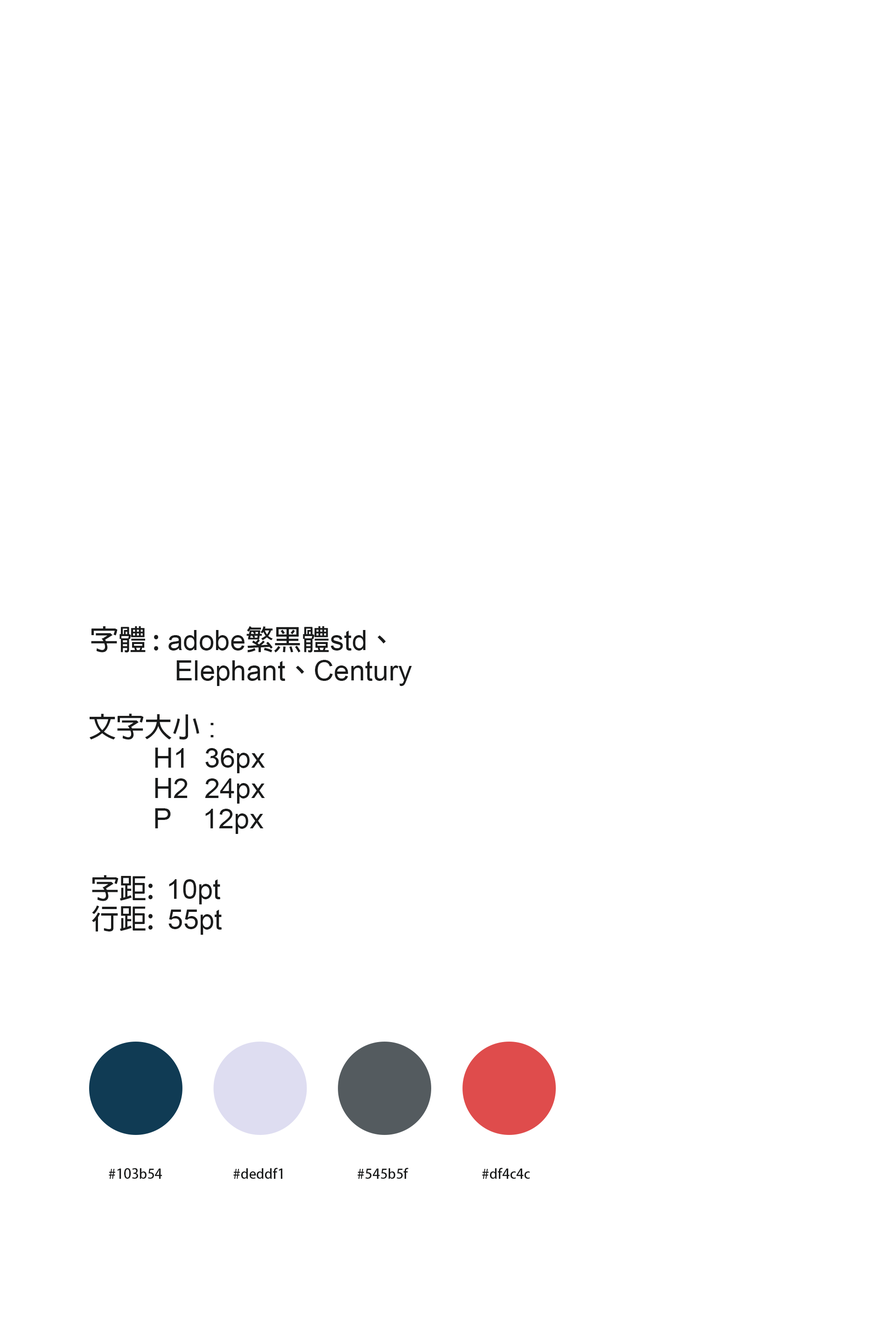
<style>
.page{position:relative;width:896px;height:1330px;background:#ffffff}
.page>*{position:absolute;margin:0}
.t1{font:28.1px/30.3px "ArialMT";color:#1a1b1b}
.t2{font:28.1px/30.3px "AdobeFanHeitiStd-Bold";color:#1a1b1b}
.t3{font:28px/30.3px "ArialMT";color:#1a1b1b}
.t4{font:28px/30.3px "AdobeFanHeitiStd-Bold";color:#1a1b1b}
.t5{font:13.5px "AdobeFanHeitiStd-Bold";color:#1a1b1b}
</style>
<div class="page">
<p class="t1" style="left:91px;top:626px;width:321px;height:60px"><span class="t2">字體 :</span> adobe<span class="t2">繁黑體</span>std<span class="t2">、<br>　　　</span>Elephant<span class="t2">、</span>Century</p>
<p class="t3" style="left:89px;top:714px;width:176px;height:120px"><span class="t4">文字大小</span> : <br>H1  36px<br>H2  24px<br>P    12px</p>
<p class="t3" style="left:92px;top:875px;width:130px;height:60px"><span class="t4">字距:  </span>10pt<br><span class="t4">行距: </span>55pt</p>
<p class="t5" style="left:109px;top:1168px;width:53px;height:11px">#103b54</p>
<p class="t5" style="left:233px;top:1168px;width:49px;height:11px">#deddf1</p>
<p class="t5" style="left:358px;top:1168px;width:50px;height:11px">#545b5f</p>
<p class="t5" style="left:482px;top:1168px;width:48px;height:11px">#df4c4c</p>
</div>
